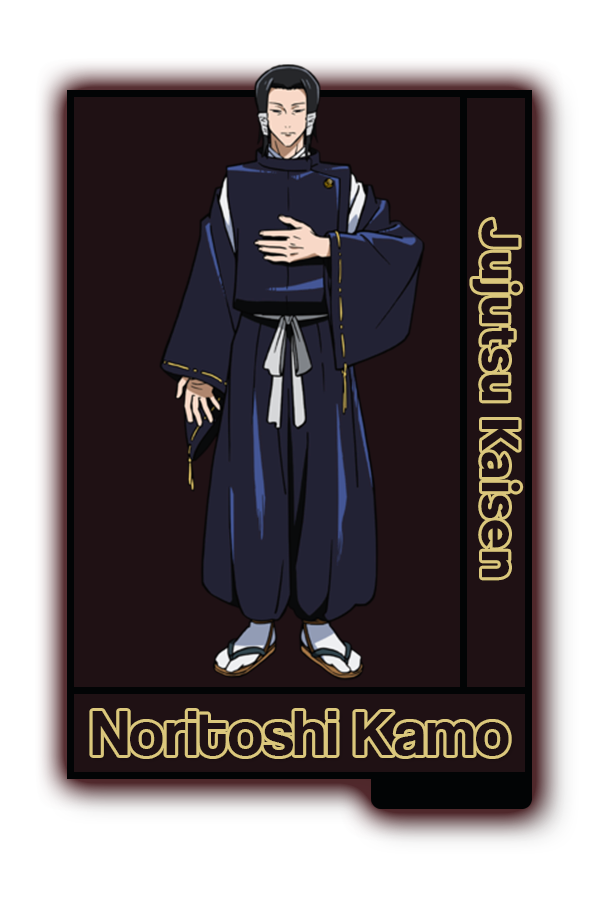
<style>
.page{position:relative;width:600px;height:900px;background:#1f1114}
.page>*{position:absolute;margin:0}
.t1{font:52px "MADETOMMY-Bold";color:#1e1214}
.t2{font:65.2px "CoolveticaRg-Regular";color:#1e1214}
</style>
<div class="page">
<p class="t1" style="left:472px;top:219px;width:49px;height:359px;rotate:90deg">Jujutsu Kaisen</p>
<p class="t2" style="left:92px;top:711px;width:417px;height:45px">Noritoshi Kamo</p>
</div>
